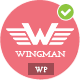
<style>
.page{position:relative;width:80px;height:80px;background:#ef6f7b}
.page>*{position:absolute;margin:0}
.t1{font:9px "JosefinSlab-Bold";color:#ffffff;text-transform:uppercase}
.t2{font:7px "JosefinSlab-Bold";letter-spacing:0.059em;color:#ffffff;text-transform:uppercase}
</style>
<div class="page">
<p class="t1" style="left:15px;top:51px;width:51px;height:6px">wingman</p>
<p class="t2" style="left:35px;top:66px;width:13px;height:7px">WP</p>
</div>
